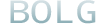
<style>
.page{position:relative;width:105px;height:24px;background:#ffffff}
.page>*{position:absolute;margin:0}
.t1{font:31.5px "DroidSansMono";letter-spacing:-0.015em;color:#a9c3c9;scale:1.2 1}
</style>
<div class="page">
<p class="t1" style="left:10px;top:0px;width:86px;height:24px">BOLG</p>
</div>
